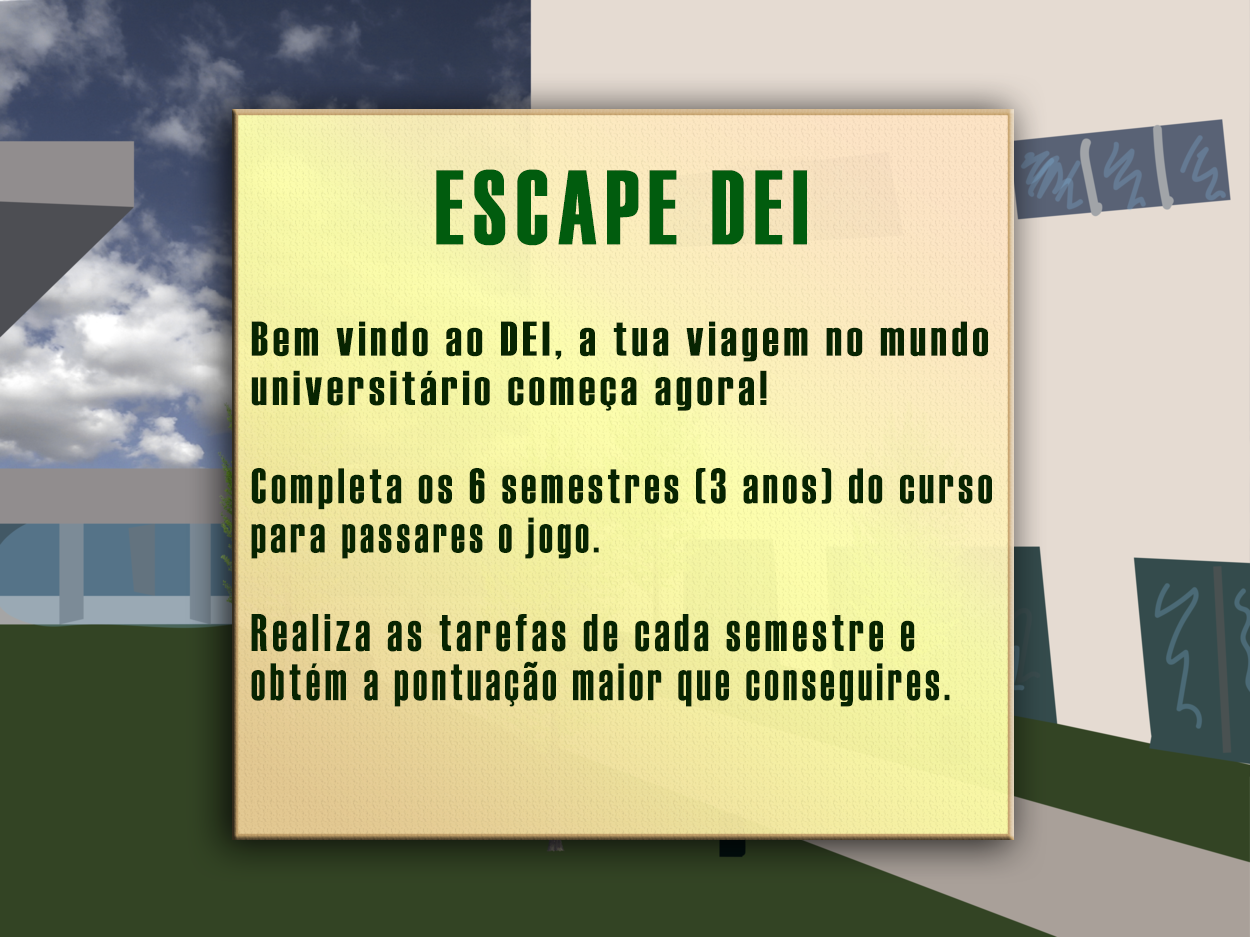
<style>
.page{position:relative;width:1250px;height:937px}
.page>*{position:absolute;margin:0}
.t1{font:106.1px "Haettenschweiler";letter-spacing:0.1em;color:#015c0e;scale:0.84 1}
.t2{font:48.7px/49.2px "Haettenschweiler";letter-spacing:0.1em;color:#072401;scale:0.94 1}
.t3{font:50px/49.2px "Haettenschweiler";letter-spacing:0.11em;color:#072401;scale:0.84 1}
.t4{font:50px/49.2px "Haettenschweiler";letter-spacing:0.11em;color:#072401;scale:0.78 1}
.t5{font:52.9px/49.2px "Haettenschweiler";letter-spacing:0.119em;color:#072401;scale:0.78 1}
.t6{font:52.9px/49.2px "Haettenschweiler";letter-spacing:0.119em;color:#072401;scale:0.76 1}
.t7{font:52.9px/49.2px "Haettenschweiler";letter-spacing:0.11em;color:#072401;scale:0.76 1}
</style>
<div class="page">
<p class="t1" style="left:436px;top:169px;width:371px;height:77px">ESCAPE DEI</p>
<p class="t2" style="left:251px;top:321px;width:741px;height:386px">Bem vindo ao DEI, a tua viagem no mundo <br>universitário começa agora!<br><br><span class="t3">Completa os 6 semestres (3 anos) do curso<br>para </span><span class="t4">passares o jogo. <br><br></span><span class="t5">Realiza as tarefas de cada semestre </span><span class="t6">e <br>obtém </span><span class="t7">a pontuação maior que conseguires.</span></p>
</div>
